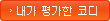
<style>
.page{position:relative;width:110px;height:21px}
.page>*{position:absolute;margin:0}
.t1{font:12px "morris9";color:#ffffff}
</style>
<div class="page">
<p class="t1" style="left:17px;top:6px;width:80px;height:10px">내가 평가한 코디</p>
</div>
